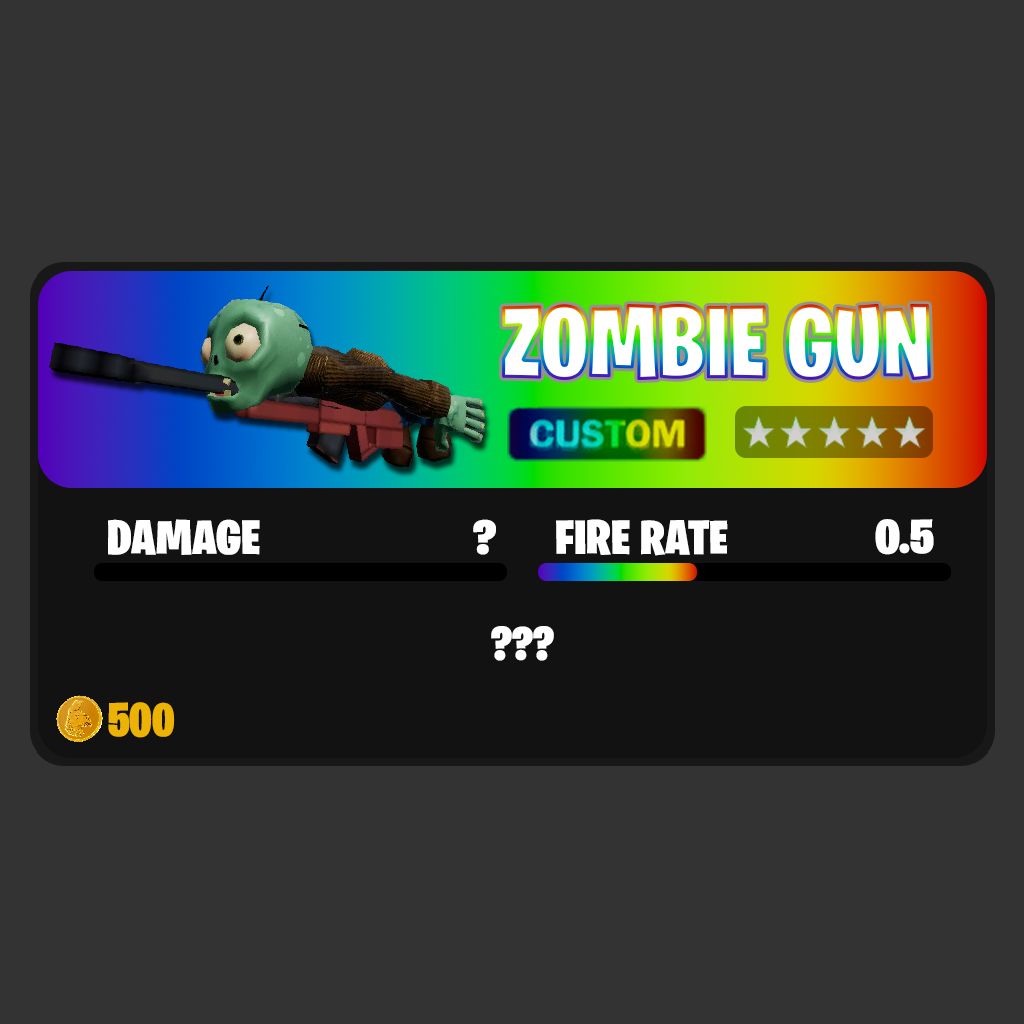
<style>
.page{position:relative;width:1024px;height:1024px;background:#333333}
.page>*{position:absolute;margin:0}
.t1{font:100.8px "BurbankBigCondensed-Black";color:#ffffff}
.t2{font:48.4px "BurbankBigCondensed-Black";color:#ffffff;scale:1.1 1}
.t3{font:48.3px "BurbankBigCondensed-Black";color:#ffffff;scale:1.1 1}
.t4{font:48px "BurbankBigCondensed-Black";color:#ffffff}
.t5{font:48px "BurbankBigCondensed-Black";color:#ecb304}
</style>
<div class="page">
<p class="t1" style="left:503px;top:304px;width:427px;height:76px">ZOMBIE GUN</p>
<p class="t2" style="left:108px;top:519px;width:152px;height:36px">DAMAGE</p>
<p class="t2" style="left:473px;top:519px;width:23px;height:36px">?</p>
<p class="t3" style="left:556px;top:519px;width:172px;height:37px">FIRE RATE</p>
<p class="t3" style="left:875px;top:519px;width:59px;height:36px">0.5</p>
<p class="t4" style="left:491px;top:626px;width:63px;height:35px">???</p>
<p class="t5" style="left:108px;top:702px;width:67px;height:36px">500</p>
</div>
